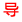
<style>
.page{position:relative;width:22px;height:22px;background:#ffffff}
.page>*{position:absolute;margin:0}
.t1{font:16px "FZLTHK--GBK1-0";color:#ff0000}
</style>
<div class="page">
<p class="t1" style="left:3px;top:2px;width:16px;height:15px">导</p>
</div>
